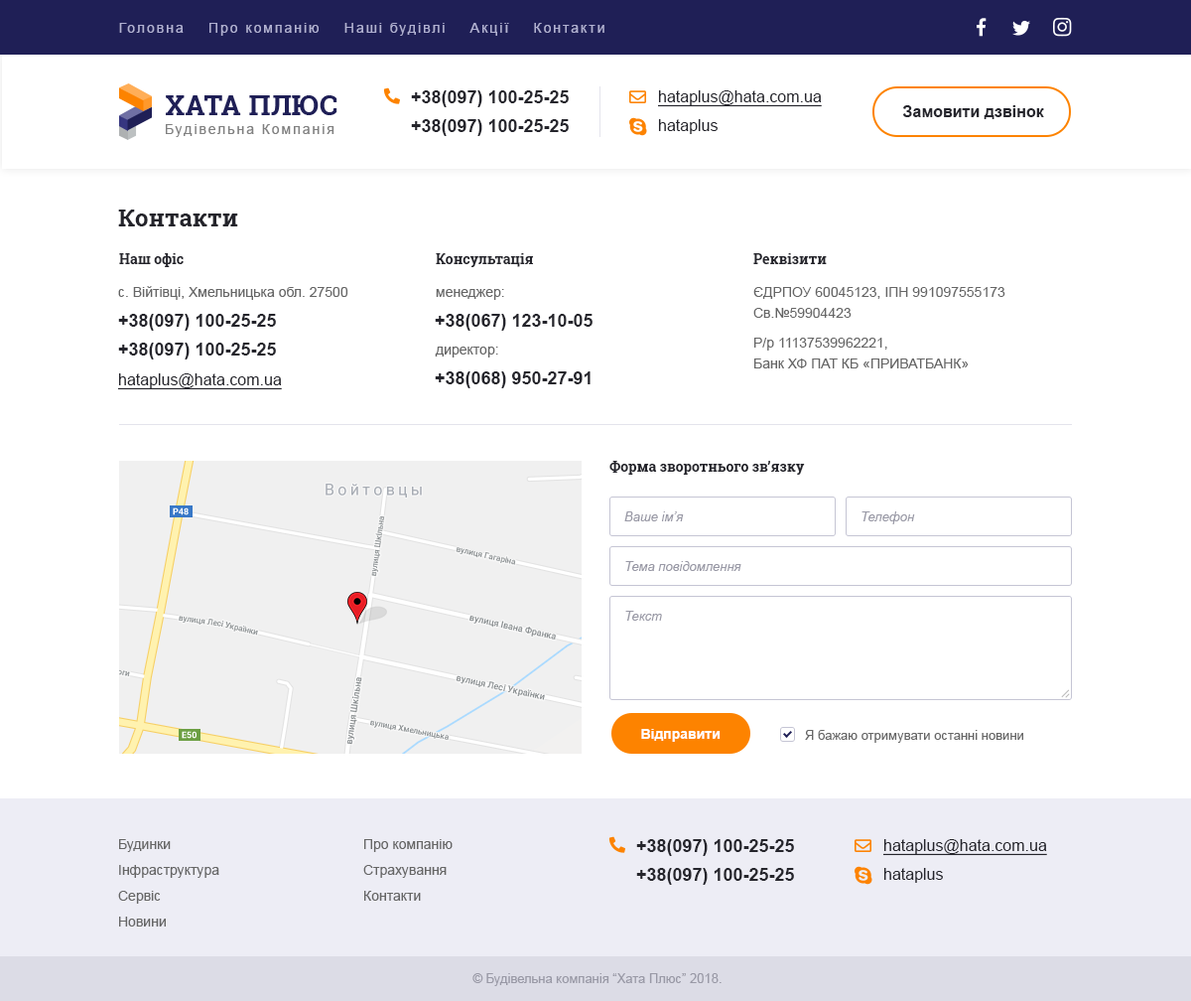
<style>
.page{position:relative;width:1191px;height:1001px;background:#ffffff}
.page>*{position:absolute;margin:0}
.t1{font:13.9px "ArialMT";letter-spacing:0.14em;color:#b1b1d2}
.t2{font:17.9px "Arial-BoldMT";color:#25252c}
.t3{font:15.9px "ArialMT";color:#25252c;text-decoration:underline}
.t4{font:15.9px "Arial-BoldMT";color:#25252c}
.t5{font:15.9px "ArialMT";color:#25252c}
.t6{font:23.8px "RobotoSlab-Bold";color:#24242b}
.t7{font:13.9px "RobotoSlab-Bold";color:#24242b}
.t8{font:13.9px "ArialMT";color:#666666}
.t9{font:13.9px/20.9px "ArialMT";color:#666666}
.t10{font:12.9px "Arial-ItalicMT";color:#9999a6}
.t11{font:13.9px "Arial-BoldMT";color:#ffffff}
.t12{font:12.9px "ArialMT";color:#666666}
.t13{font:13.9px/25.8px "ArialMT";color:#666666}
.t14{font:12.9px "ArialMT";color:#9999a6}
</style>
<div class="page">
<p class="t1" style="left:119px;top:23px;width:486px;height:13px">Головна    Про компанію    Наші будівлі    Акції    Контакти</p>
<p class="t2" style="left:411px;top:90px;width:158px;height:17px">+38(097) 100-25-25</p>
<p class="t3" style="left:658px;top:90px;width:164px;height:17px">hataplus@hata.com.ua</p>
<p class="t4" style="left:903px;top:105px;width:142px;height:14px">Замовити дзвінок</p>
<p class="t2" style="left:411px;top:119px;width:158px;height:17px">+38(097) 100-25-25</p>
<p class="t5" style="left:658px;top:119px;width:60px;height:15px">hataplus</p>
<p class="t6" style="left:118px;top:209px;width:120px;height:17px">Контакти</p>
<p class="t7" style="left:119px;top:253px;width:65px;height:14px">Наш офіс</p>
<p class="t7" style="left:436px;top:253px;width:98px;height:14px">Консультація</p>
<p class="t7" style="left:754px;top:253px;width:73px;height:11px">Реквізити</p>
<p class="t8" style="left:118px;top:286px;width:231px;height:14px">с. Війтівці, Хмельницька обл. 27500</p>
<p class="t8" style="left:436px;top:289px;width:68px;height:11px">менеджер:</p>
<p class="t9" style="left:754px;top:287px;width:252px;height:31px">ЄДРПОУ 60045123, ІПН 991097555173<br>Св.№59904423</p>
<p class="t2" style="left:118px;top:314px;width:158px;height:17px">+38(097) 100-25-25</p>
<p class="t2" style="left:435px;top:314px;width:158px;height:17px">+38(067) 123-10-05</p>
<p class="t9" style="left:755px;top:338px;width:214px;height:30px">Р/р 11137539962221,<br>Банк ХФ ПАТ КБ «ПРИВАТБАНК»</p>
<p class="t2" style="left:118px;top:343px;width:158px;height:16px">+38(097) 100-25-25</p>
<p class="t8" style="left:435px;top:347px;width:63px;height:10px">директор:</p>
<p class="t3" style="left:118px;top:373px;width:164px;height:17px">hataplus@hata.com.ua</p>
<p class="t2" style="left:435px;top:371px;width:156px;height:17px">+38(068) 950-27-91</p>
<p class="t7" style="left:610px;top:461px;width:195px;height:14px">Форма зворотнього зв’язку</p>
<p class="t10" style="left:625px;top:511px;width:59px;height:10px">Ваше ім’я</p>
<p class="t10" style="left:862px;top:511px;width:53px;height:13px">Телефон</p>
<p class="t10" style="left:626px;top:561px;width:116px;height:10px">Тема повідомлення</p>
<p class="t10" style="left:626px;top:611px;width:36px;height:10px">Текст</p>
<p class="t11" style="left:641px;top:729px;width:80px;height:13px">Відправити</p>
<p class="t12" style="left:805px;top:730px;width:219px;height:13px">Я бажаю отримувати останні новини</p>
<p class="t13" style="left:118px;top:839px;width:101px;height:87px">Будинки<br>Інфраструктура<br>Сервіс<br>Новини</p>
<p class="t13" style="left:363px;top:839px;width:90px;height:62px">Про компанію<br>Страхування<br>Контакти</p>
<p class="t2" style="left:636px;top:839px;width:158px;height:17px">+38(097) 100-25-25</p>
<p class="t3" style="left:884px;top:839px;width:163px;height:17px">hataplus@hata.com.ua</p>
<p class="t2" style="left:636px;top:868px;width:158px;height:17px">+38(097) 100-25-25</p>
<p class="t5" style="left:884px;top:868px;width:59px;height:15px">hataplus</p>
<p class="t14" style="left:473px;top:973px;width:249px;height:13px">© Будівельна компанія “Хата Плюс” 2018.</p>
</div>
